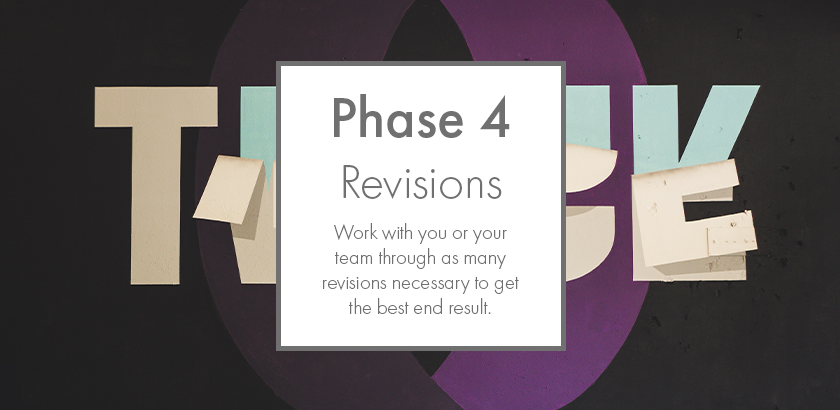
<style>
.page{position:relative;width:840px;height:410px;background:#ffffff}
.page>*{position:absolute;margin:0}
.t1{font:58.3px "FuturaPT-Medium";color:#707070}
.t2{font:50px "FuturaPT-Light";color:#707070}
.t3{font:20.8px "FuturaPT-Light";color:#707070}
</style>
<div class="page">
<p class="t1" style="left:334px;top:94px;width:176px;height:44px">Phase 4</p>
<p class="t2" style="left:343px;top:165px;width:159px;height:34px">Revisions</p>
<p class="t3" style="left:323px;top:223px;width:196px;height:91px;text-align:center">Work with you or your team through as many revisions necessary to get the best end result.</p>
</div>
